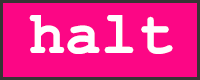
<style>
.page{position:relative;width:200px;height:80px;background:#fc0685}
.page>*{position:absolute;margin:0}
.t1{font:60px "CourierNewPS-BoldMT";color:#fefefe}
</style>
<div class="page">
<p class="t1" style="left:29px;top:15px;width:144px;height:39px">halt</p>
</div>
